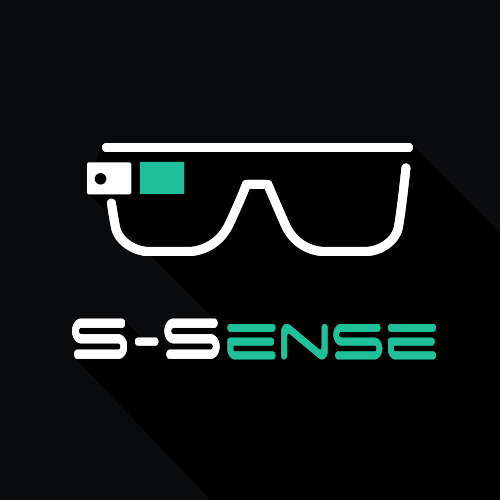
<style>
.page{position:relative;width:500px;height:500px;background:#090b0c}
.page>*{position:absolute;margin:0}
.t1{font:81.2px "SpaceAge";color:#1ec199;scale:0.73 1}
.t2{font:91.2px "SpaceAge";color:#ffffff;font-weight:bold;scale:0.73 1}
.t3{font:81.2px "SpaceAge";color:#ffffff;scale:0.73 1}
</style>
<div class="page">
<p class="t1" style="left:72px;top:318px;width:364px;height:42px"><span class="t2">S</span><span class="t3">-</span><span class="t2">S</span>ense</p>
</div>
